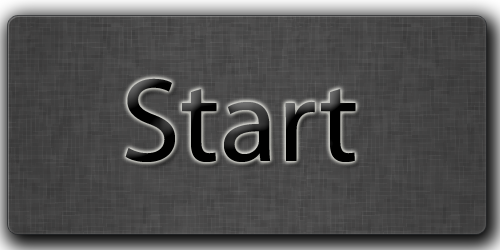
<style>
.page{position:relative;width:500px;height:250px}
.page>*{position:absolute;margin:0}
.t1{font:120px "MyriadPro-Regular";color:#000000}
</style>
<div class="page">
<p class="t1" style="left:125px;top:78px;width:231px;height:84px">Start</p>
</div>
